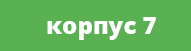
<style>
.page{position:relative;width:191px;height:51px;background:#59b151}
.page>*{position:absolute;margin:0}
.t1{font:24px "OpenSans-Extrabold";color:#ffffff}
</style>
<div class="page">
<p class="t1" style="left:47px;top:17px;width:109px;height:23px">корпус 7</p>
</div>
